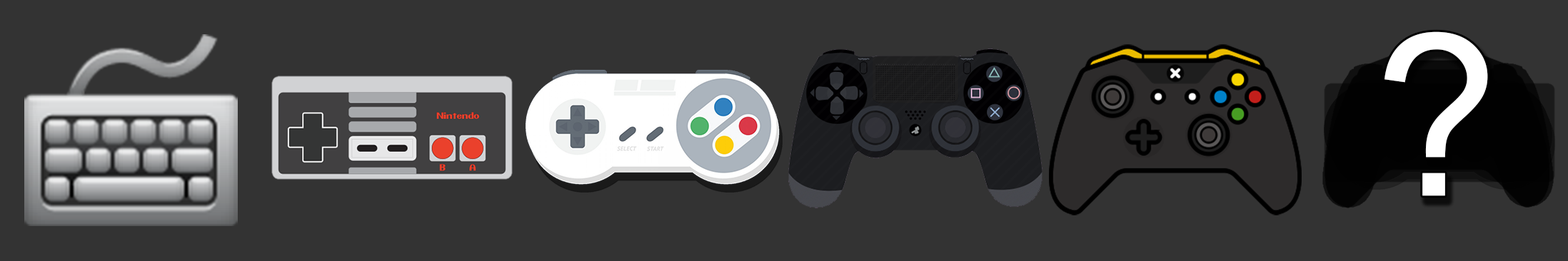
<style>
.page{position:relative;width:1568px;height:261px;background:#333333}
.page>*{position:absolute;margin:0}
.t1{font:223.9px "ArialMT";color:#ffffff;font-weight:bold}
</style>
<div class="page">
<p class="t1" style="left:1384px;top:31px;width:104px;height:165px">?</p>
</div>
